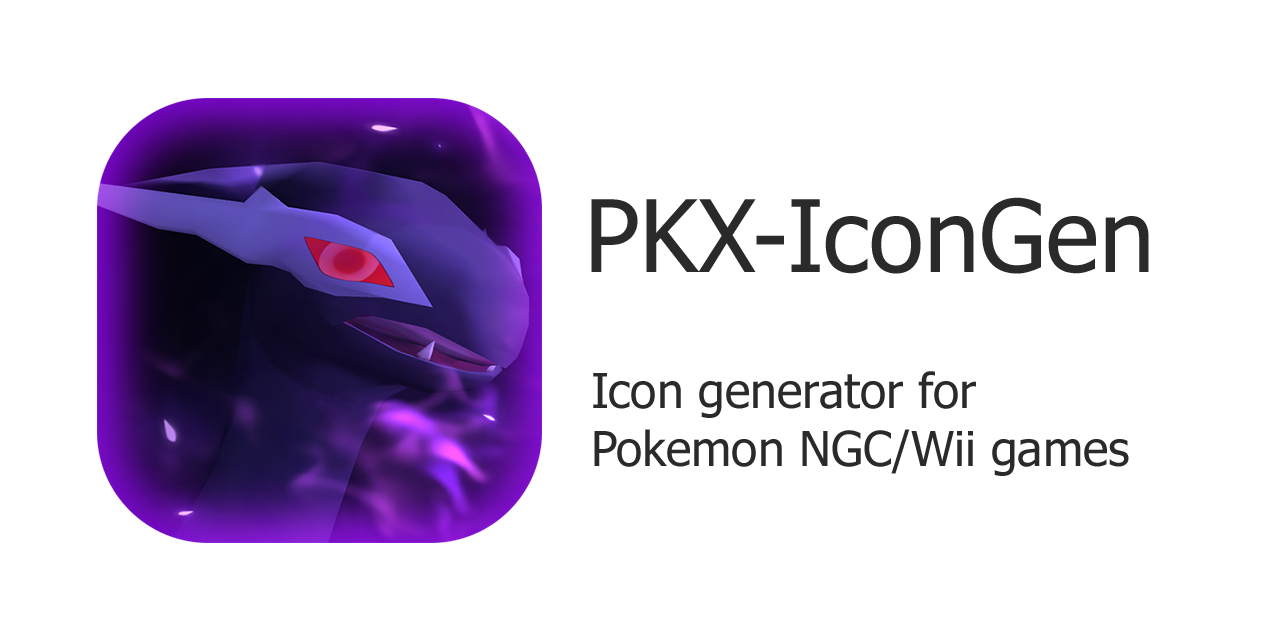
<style>
.page{position:relative;width:1280px;height:640px;background:#ffffff}
.page>*{position:absolute;margin:0}
.t1{font:100px "Tahoma";color:#2a2a2a}
.t2{font:48px "Tahoma";color:#2a2a2a}
</style>
<div class="page">
<p class="t1" style="left:591px;top:197px;width:558px;height:77px">PKX-IconGen</p>
<p class="t2" style="left:593px;top:371px;width:536px;height:105px">Icon generator for Pokemon NGC/Wii games</p>
</div>
